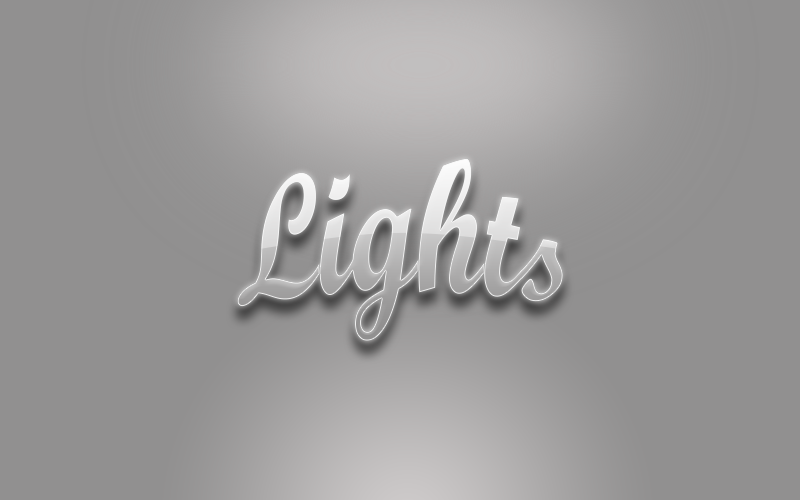
<style>
.page{position:relative;width:800px;height:500px;background:#919090}
.page>*{position:absolute;margin:0}
.t1{font:134.3px "ScriptMTBold"}
</style>
<div class="page">
<p class="t1" style="left:237px;top:158px;width:326px;height:183px">Lights</p>
</div>
